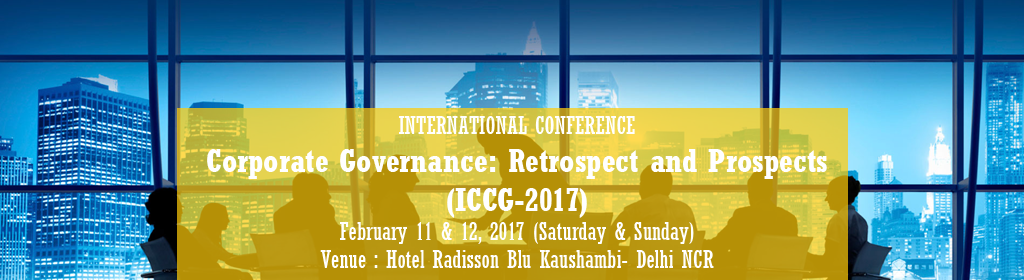
<style>
.page{position:relative;width:1024px;height:280px}
.page>*{position:absolute;margin:0}
.t1{font:24px "Rockwell-Condensed";color:#ffffff}
.t2{font:32px "Rockwell-CondensedBold";color:#ffffff}
</style>
<div class="page">
<p class="t1" style="left:207px;top:116px;width:620px;height:152px;text-align:center">INTERNATIONAL CONFERENCE<br><span class="t2">Corporate Governance: Retrospect and Prospects<br>(ICCG-2017)<br></span>February 11 &amp; 12, 2017 (Saturday &amp; Sunday)<br>Venue : Hotel Radisson Blu Kaushambi- Delhi NCR</p>
</div>
